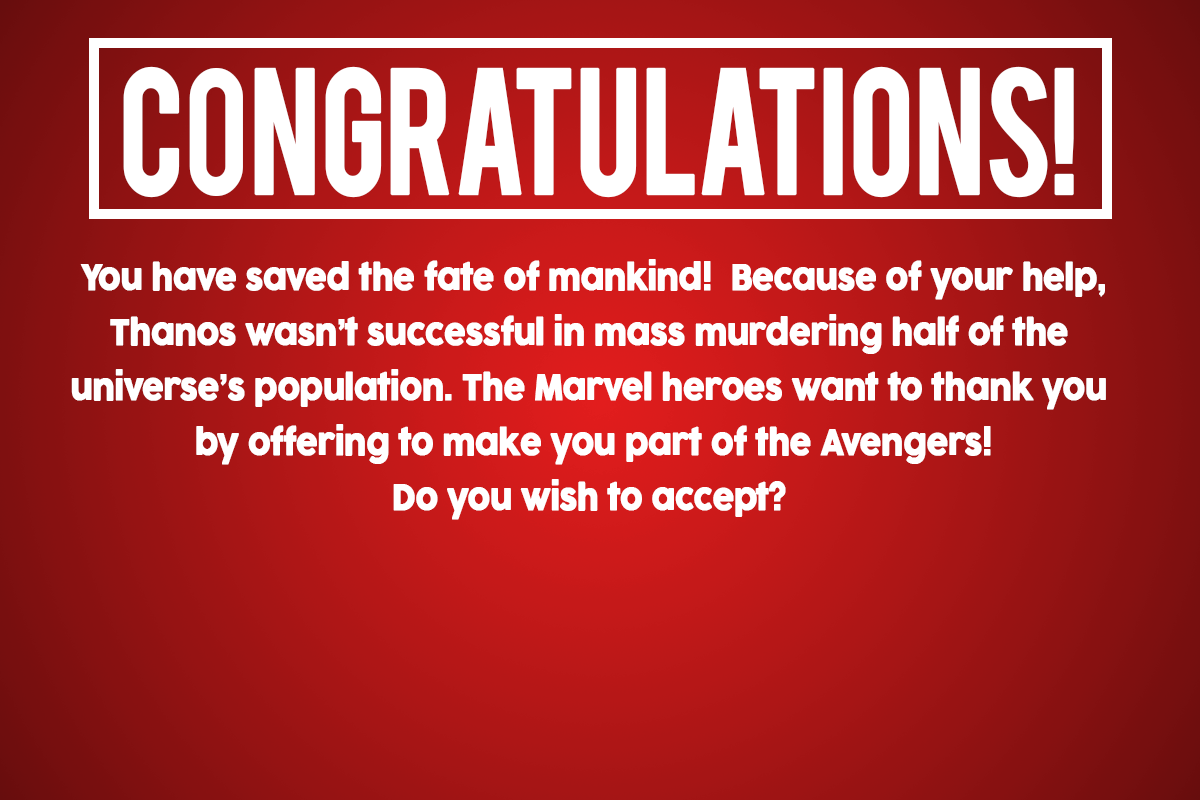
<style>
.page{position:relative;width:1200px;height:800px}
.page>*{position:absolute;margin:0}
.t1{font:140.3px "Bebas";letter-spacing:-0.04em;color:#ffffff;font-weight:bold;scale:0.89 1}
.t2{font:34.7px/54.9px "Cocogoose";letter-spacing:-0.04em;color:#ffffff;font-weight:bold;scale:0.89 1}
</style>
<div class="page">
<p class="t1" style="left:123px;top:66px;width:951px;height:132px">CONGRATULATIONS!</p>
<p class="t2" style="left:71px;top:259px;width:1035px;height:261px;text-align:center">You have saved the fate of mankind!  Because of your help, <br>Thanos wasn’t successful in mass murdering half of the <br>universe’s population. The Marvel heroes want to thank you <br>by offering to make you part of the Avengers!<br>Do you wish to accept?</p>
</div>
